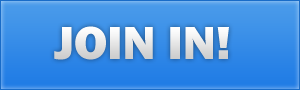
<style>
.page{position:relative;width:300px;height:90px}
.page>*{position:absolute;margin:0}
.t1{font:48px "FranklinGothic-Heavy";color:#e7e7e7}
</style>
<div class="page">
<p class="t1" style="left:54px;top:26px;width:175px;height:34px">JOIN IN!</p>
</div>
